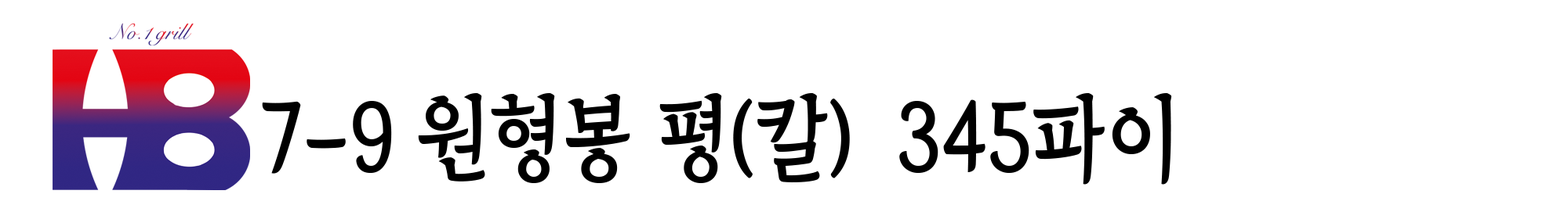
<style>
.page{position:relative;width:1568px;height:205px;background:#ffffff}
.page>*{position:absolute;margin:0}
.t1{font:93.7px "TheIndependenceHallofKorea-Regular";color:#000000;scale:0.89 1}
</style>
<div class="page">
<p class="t1" style="left:262px;top:93px;width:910px;height:92px">7-9 원형봉 평(칼)  345파이</p>
</div>
